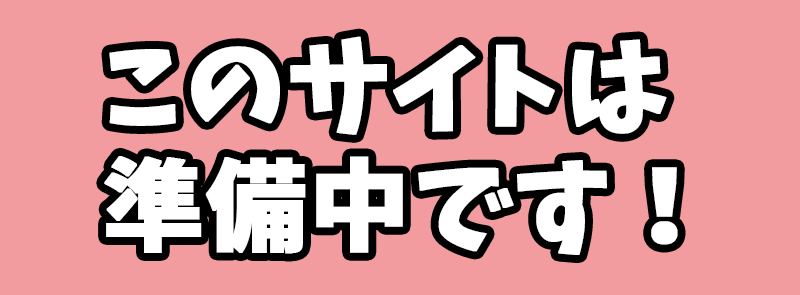
<style>
.page{position:relative;width:800px;height:295px;background:#f29c9f}
.page>*{position:absolute;margin:0}
.t1{font:100px "Keifont";color:#ffffff;font-weight:bold}
</style>
<div class="page">
<p class="t1" style="left:104px;top:36px;width:574px;height:219px;text-align:center">このサイトは<br>  準備中です！</p>
</div>
